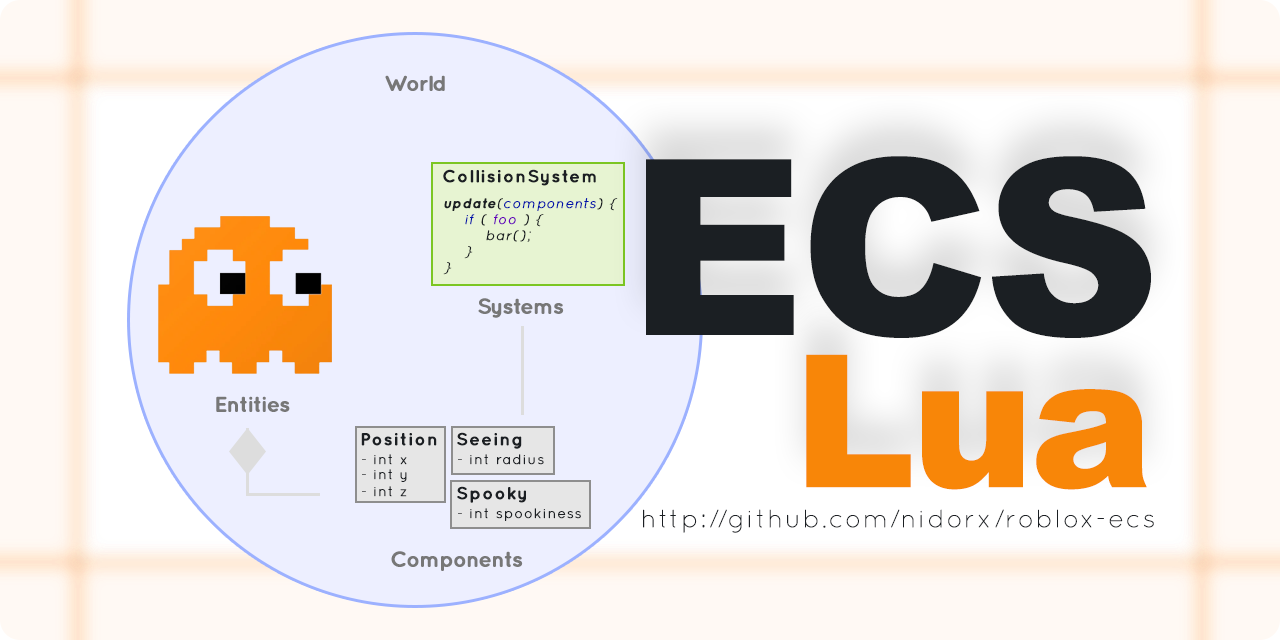
<style>
.page{position:relative;width:1280px;height:640px;background:#fff9f4}
.page>*{position:absolute;margin:0}
.t1{font:37px "Quicksand-Bold";letter-spacing:-0.05em;color:#777777;font-weight:bold}
.t2{font:420.5px "Arial-Black";letter-spacing:-0.05em;color:#1b1f23;font-weight:bold}
.t3{font:30px "Quicksand-Bold";letter-spacing:0.05em;color:#1b1f23;font-weight:bold}
.t4{font:24px/16px "Quicksand-Italic";letter-spacing:0.05em;color:#1b1f23;font-weight:bold}
.t5{font:24px/16px "Quicksand-BoldItalic";letter-spacing:0.05em;color:#1b1f23;font-weight:bold}
.t6{font:24px/16px "Quicksand-Italic";letter-spacing:0.05em;color:#0011aa;font-weight:bold}
.t7{font:24px/16px "Quicksand-Italic";letter-spacing:0.05em;color:#6600bb;font-weight:bold}
.t8{font:315.9px "Arial-Black";letter-spacing:-0.05em;color:#f88608;font-weight:bold}
.t9{font:24px "Quicksand-Regular";letter-spacing:0.05em;color:#1b1f23;font-weight:bold}
.t10{font:43px "Quicksand-Light";letter-spacing:0.05em;color:#1b1f23;font-weight:bold}
</style>
<div class="page">
<p class="t1" style="left:385px;top:75px;width:60px;height:16px">World</p>
<p class="t2" style="left:646px;top:156px;width:505px;height:182px">ECS</p>
<p class="t3" style="left:443px;top:169px;width:153px;height:17px">CollisionSystem</p>
<p class="t4" style="left:443px;top:198px;width:175px;height:77px"><span class="t5">update</span>(<span class="t6">components</span>) {<br>    <span class="t6">if </span>( <span class="t7">foo </span>) {<br>        bar();<br>    }<br>}</p>
<p class="t1" style="left:478px;top:298px;width:86px;height:20px">Systems</p>
<p class="t8" style="left:806px;top:354px;width:341px;height:136px">Lua</p>
<p class="t1" style="left:216px;top:396px;width:74px;height:16px">Entities</p>
<p class="t3" style="left:361px;top:433px;width:76px;height:13px">Position</p>
<p class="t3" style="left:457px;top:432px;width:65px;height:17px">Seeing</p>
<p class="t9" style="left:362px;top:454px;width:45px;height:11px">- int x</p>
<p class="t9" style="left:458px;top:454px;width:86px;height:11px">- int radius</p>
<p class="t9" style="left:362px;top:469px;width:45px;height:13px">- int y</p>
<p class="t9" style="left:362px;top:486px;width:45px;height:11px">- int z</p>
<p class="t3" style="left:457px;top:486px;width:69px;height:17px">Spooky</p>
<p class="t9" style="left:458px;top:508px;width:123px;height:13px">- int spookiness</p>
<p class="t10" style="left:643px;top:509px;width:511px;height:24px">http://github.com/nidorx/roblox-ecs</p>
<p class="t1" style="left:391px;top:551px;width:132px;height:20px">Components</p>
</div>
